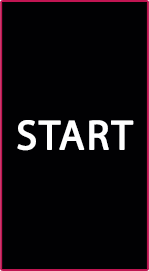
<style>
.page{position:relative;width:149px;height:271px;background:#010103}
.page>*{position:absolute;margin:0}
.t1{font:41.8px "MyriadPro-Regular";letter-spacing:0.025em;color:#ffffff;font-variant:small-caps;font-weight:bold}
</style>
<div class="page">
<p class="t1" style="left:17px;top:120px;width:117px;height:31px">START</p>
</div>
